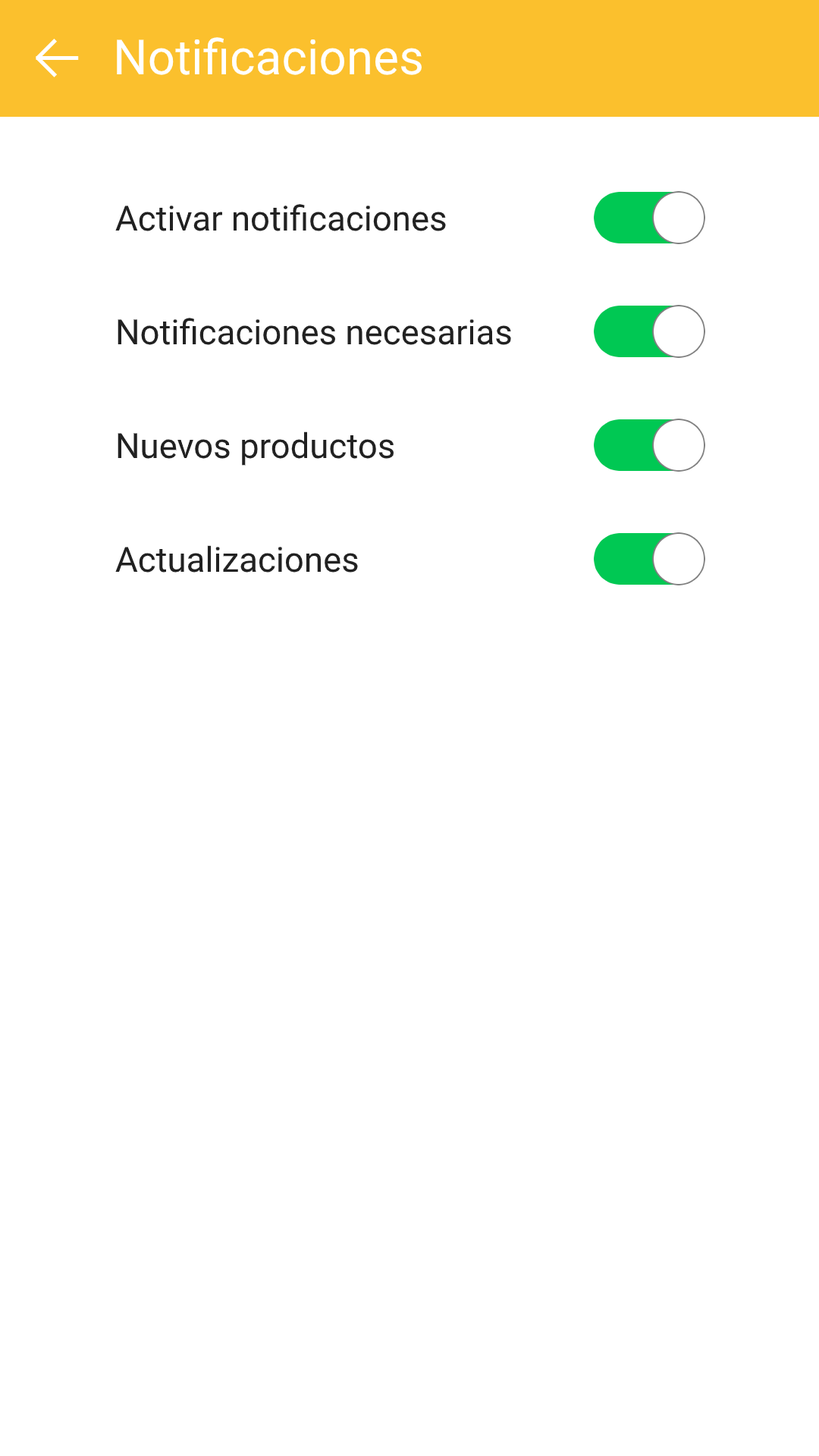
<style>
.page{position:relative;width:819px;height:1456px;background:#ffffff}
.page>*{position:absolute;margin:0}
.t1{font:48.5px "Roboto-Regular";color:#ffffff}
.t2{font:34.6px "Roboto-Regular";color:#212121}
</style>
<div class="page">
<p class="t1" style="left:117px;top:37px;width:305px;height:38px">Notificaciones</p>
<p class="t2" style="left:115px;top:204px;width:331px;height:27px">Activar notificaciones</p>
<p class="t2" style="left:118px;top:318px;width:393px;height:27px">Notificaciones necesarias</p>
<p class="t2" style="left:118px;top:431px;width:276px;height:35px">Nuevos productos</p>
<p class="t2" style="left:115px;top:545px;width:243px;height:28px">Actualizaciones</p>
</div>
